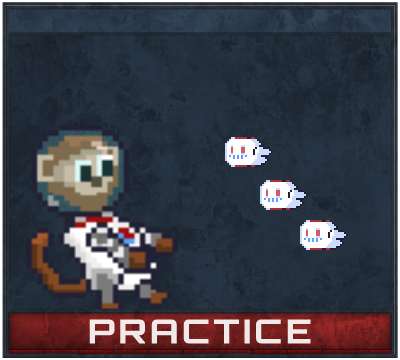
<style>
.page{position:relative;width:400px;height:360px}
.page>*{position:absolute;margin:0}
.t1{font:33.2px "Orbitron-Bold";letter-spacing:0.1em;color:#ffffff;font-weight:bold}
</style>
<div class="page">
<p class="t1" style="left:89px;top:319px;width:222px;height:25px;opacity:0.9">PRACTICE</p>
</div>
